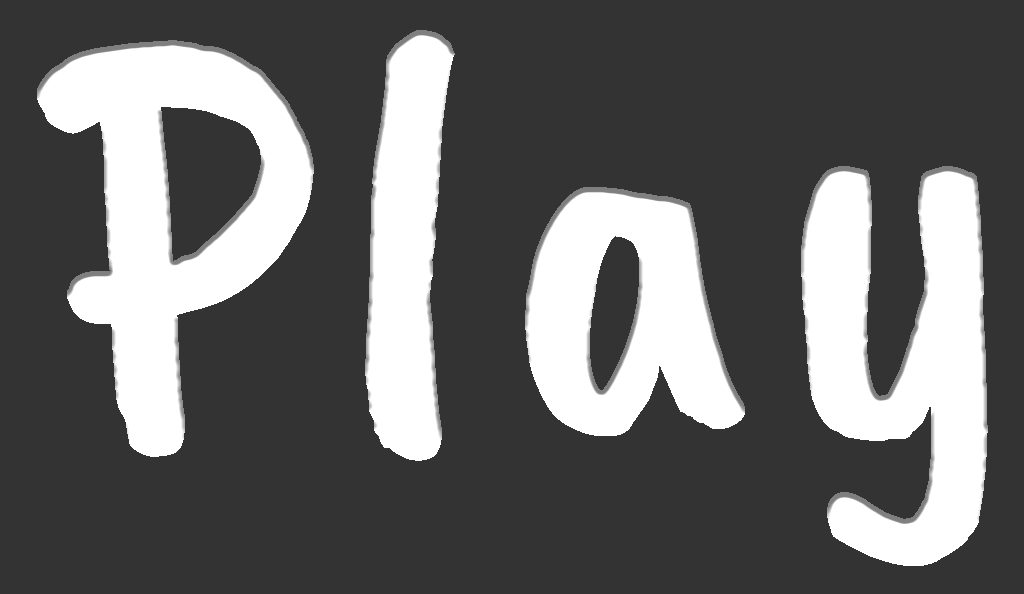
<style>
.page{position:relative;width:1024px;height:594px;background:#333333}
.page>*{position:absolute;margin:0}
.t1{font:586.5px "CaveatBrush-Regular";letter-spacing:0.04em;color:#ffffff}
</style>
<div class="page">
<p class="t1" style="left:37px;top:30px;width:951px;height:536px">Play</p>
</div>
